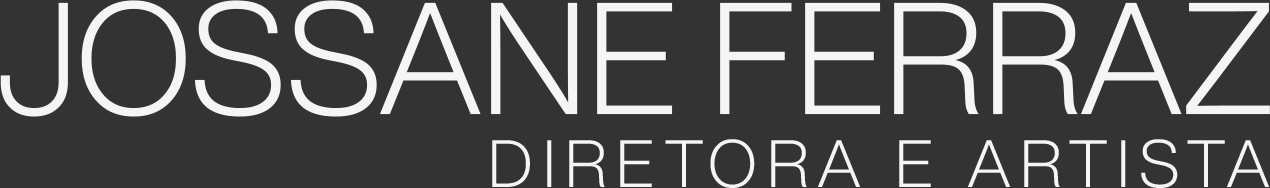
<style>
.page{position:relative;width:1270px;height:188px;background:#333333}
.page>*{position:absolute;margin:0}
.t1{font:156.1px "HelveticaNowDisplay-Light";color:#f5f5f5;text-transform:uppercase}
.t2{font:65.8px "HelveticaNowDisplay-Light";letter-spacing:0.15em;color:#f5f5f5;text-transform:uppercase}
</style>
<div class="page">
<p class="t1" style="left:0px;top:0px;width:1270px;height:117px">Jossane Ferraz</p>
<p class="t2" style="left:492px;top:139px;width:778px;height:49px">Diretora e Artista</p>
</div>
